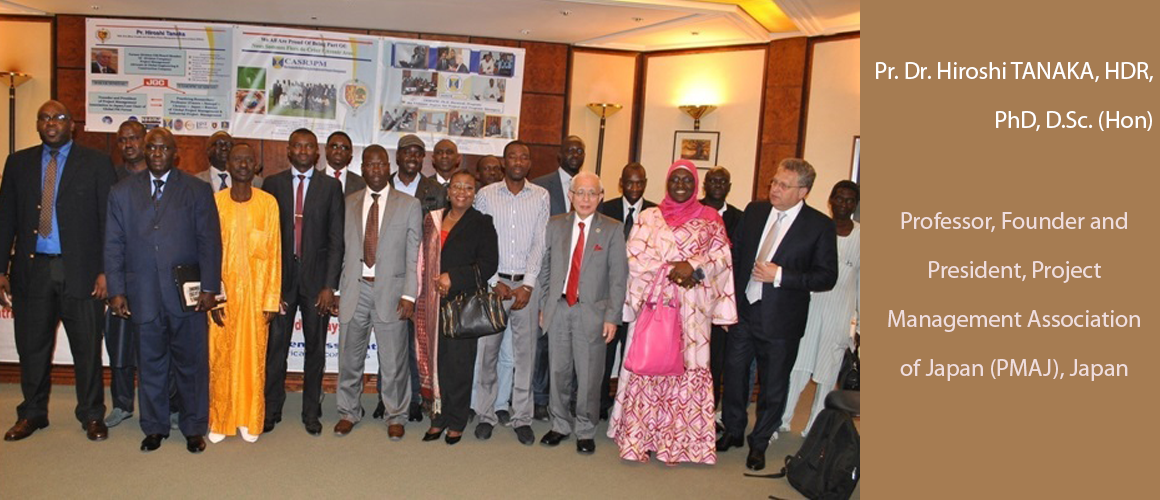
<style>
.page{position:relative;width:1160px;height:500px;background:#a67c52}
.page>*{position:absolute;margin:0}
.t1{font:24px/49px "MyriadPro-Regular";color:#ffffff}
.t2{font:24px/49px "MyriadPro-Regular";color:#efdddd}
</style>
<div class="page">
<p class="t1" style="left:876px;top:62px;width:277px;height:70px;text-align:right">Pr. Dr. Hiroshi TANAKA, HDR,                 PhD, D.Sc. (Hon)</p>
<p class="t2" style="left:888px;top:212px;width:252px;height:169px;text-align:center">Professor, Founder and President, Project Management Association of Japan (PMAJ), Japan</p>
</div>
